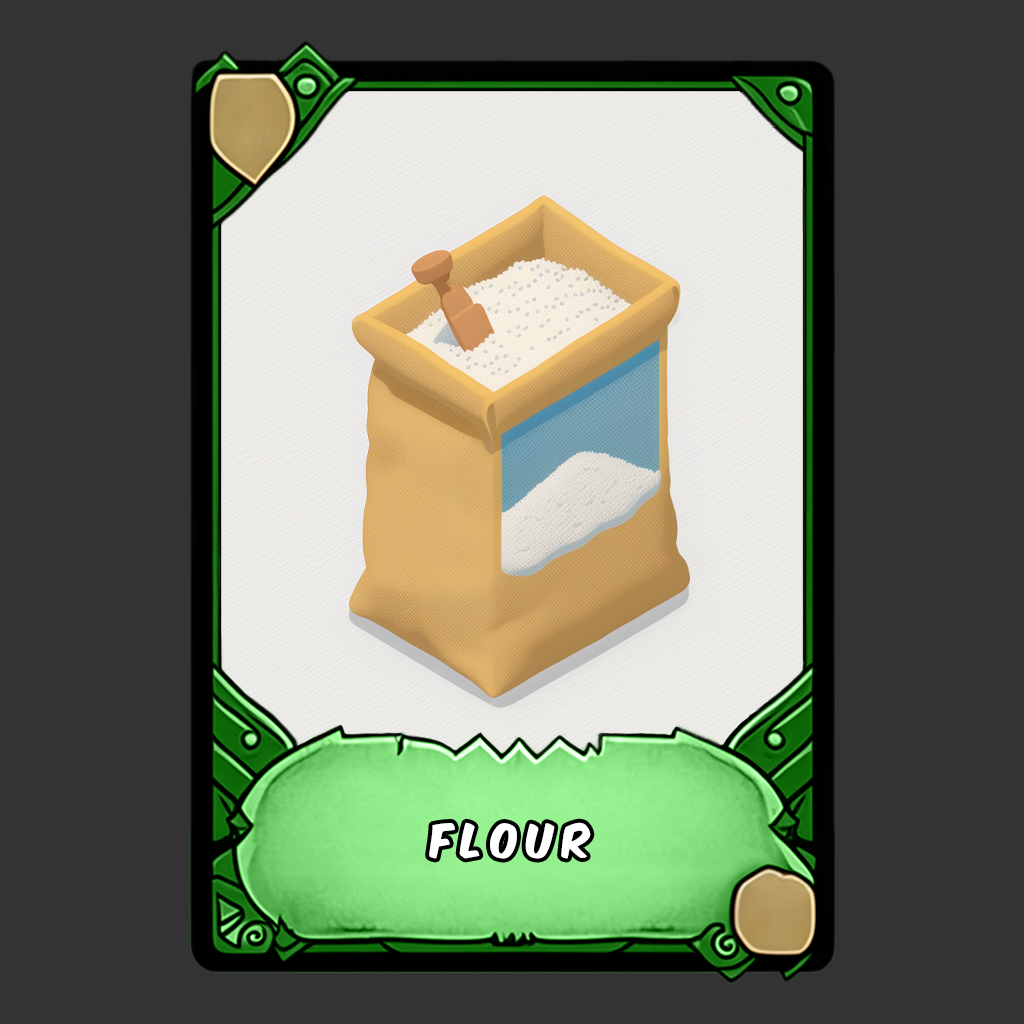
<style>
.page{position:relative;width:1024px;height:1024px;background:#333333}
.page>*{position:absolute;margin:0}
.t1{font:40px "KomikaAxis";letter-spacing:0.2em;color:#ffffff}
</style>
<div class="page">
<p class="t1" style="left:429px;top:822px;width:162px;height:37px">FLOUR</p>
</div>
